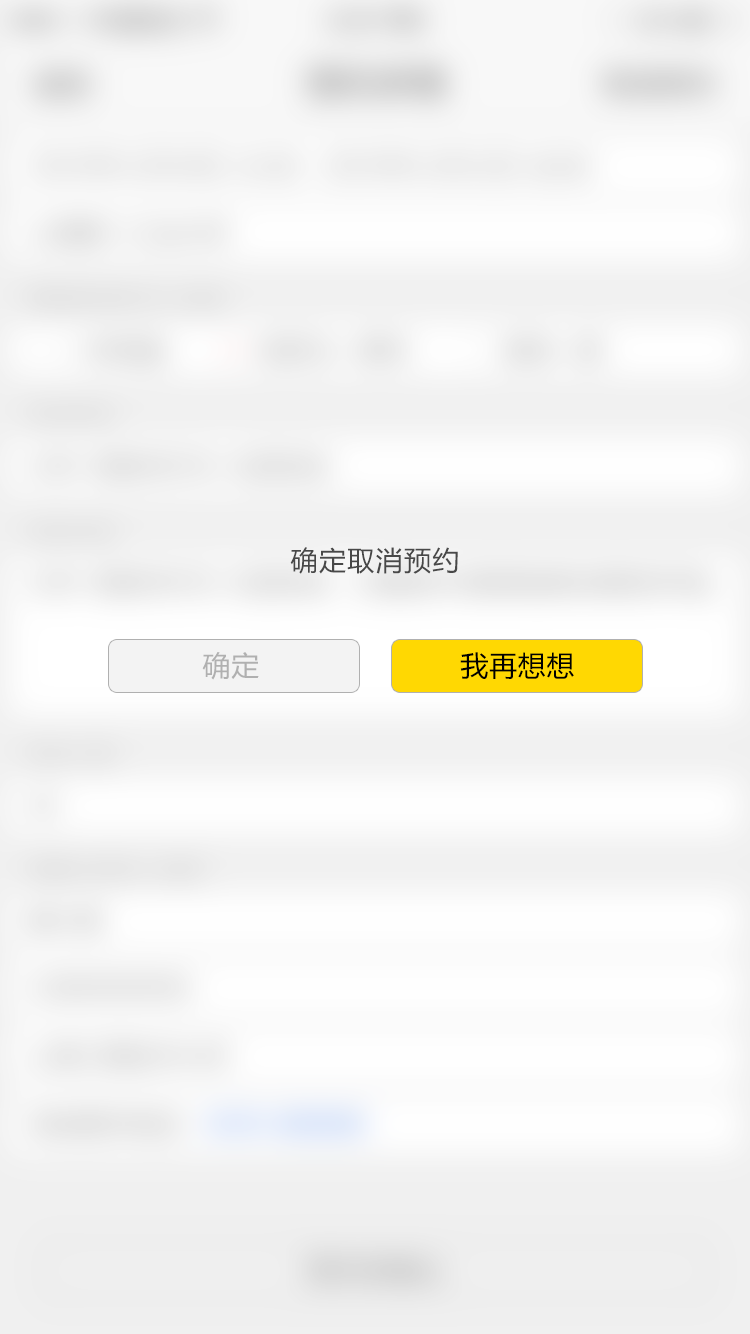
<style>
.page{position:relative;width:750px;height:1334px}
.page>*{position:absolute;margin:0}
.t1{font:27px "MicrosoftYaHei";letter-spacing:0.05em;color:#484848}
.t2{font:28px "MicrosoftYaHei";letter-spacing:0.03em;color:#b0b0b0}
.t3{font:28px "MicrosoftYaHei";letter-spacing:0.03em;color:#000000}
</style>
<div class="page">
<p class="t1" style="left:290px;top:547px;width:168px;height:27px">确定取消预约</p>
<p class="t2" style="left:202px;top:652px;width:57px;height:28px">确定</p>
<p class="t3" style="left:460px;top:652px;width:114px;height:27px">我再想想</p>
</div>
